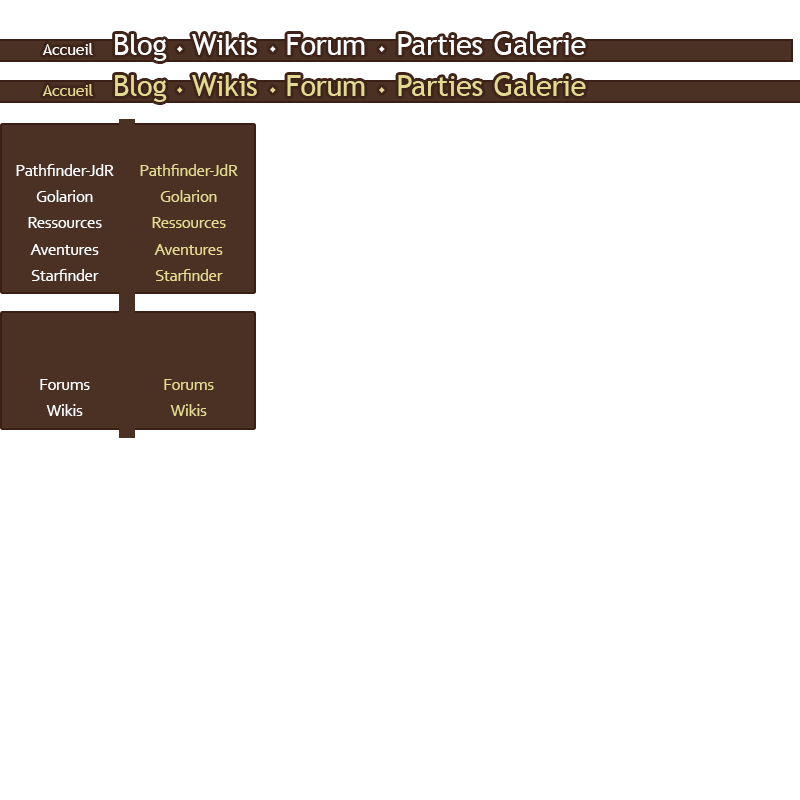
<style>
.page{position:relative;width:800px;height:800px;background:#ffffff}
.page>*{position:absolute;margin:0}
.t1{font:29.3px "TrebuchetMS";letter-spacing:-0.015em;color:#ffffff}
.t2{font:16px "TrebuchetMS";letter-spacing:-0.015em;color:#ffffff}
.t3{font:40px "SaberRegular";letter-spacing:-0.015em;color:#ffffff}
.t4{font:29.3px "TrebuchetMS";letter-spacing:-0.015em;color:#e4da92}
.t5{font:16px "TrebuchetMS";letter-spacing:-0.015em;color:#e4da92}
.t6{font:40px "SaberRegular";letter-spacing:-0.015em;color:#e4da92}
.t7{font:16.7px/26.2px "Corbel";letter-spacing:-0.015em;color:#ffffff}
.t8{font:16.7px/26.2px "Corbel";letter-spacing:-0.015em;color:#e4da92}
</style>
<div class="page">
<p class="t1" style="left:115px;top:34px;width:52px;height:27px">Blog</p>
<p class="t1" style="left:192px;top:34px;width:65px;height:21px">Wikis</p>
<p class="t1" style="left:287px;top:34px;width:78px;height:21px">Forum</p>
<p class="t1" style="left:398px;top:34px;width:85px;height:21px">Parties</p>
<p class="t1" style="left:494px;top:34px;width:92px;height:21px">Galerie</p>
<p class="t2" style="left:42px;top:43px;width:51px;height:12px">Accueil</p>
<p class="t3" style="left:177px;top:46px;width:6px;height:6px">·</p>
<p class="t3" style="left:270px;top:46px;width:6px;height:6px">·</p>
<p class="t3" style="left:379px;top:46px;width:6px;height:6px">·</p>
<p class="t4" style="left:115px;top:75px;width:52px;height:27px">Blog</p>
<p class="t4" style="left:192px;top:75px;width:65px;height:21px">Wikis</p>
<p class="t4" style="left:287px;top:75px;width:78px;height:21px">Forum</p>
<p class="t4" style="left:398px;top:75px;width:85px;height:21px">Parties</p>
<p class="t4" style="left:494px;top:75px;width:92px;height:21px">Galerie</p>
<p class="t5" style="left:42px;top:84px;width:51px;height:12px">Accueil</p>
<p class="t6" style="left:177px;top:87px;width:6px;height:6px">·</p>
<p class="t6" style="left:270px;top:87px;width:6px;height:6px">·</p>
<p class="t6" style="left:379px;top:87px;width:6px;height:6px">·</p>
<p class="t7" style="left:16px;top:164px;width:98px;height:117px;text-align:center">Pathfinder-JdR<br>Golarion<br>Ressources<br>Aventures<br>Starfinder</p>
<p class="t8" style="left:140px;top:164px;width:98px;height:117px;text-align:center">Pathfinder-JdR<br>Golarion<br>Ressources<br>Aventures<br>Starfinder</p>
<p class="t7" style="left:40px;top:379px;width:50px;height:37px;text-align:center">Forums<br>Wikis</p>
<p class="t8" style="left:164px;top:379px;width:50px;height:37px;text-align:center">Forums<br>Wikis</p>
</div>
